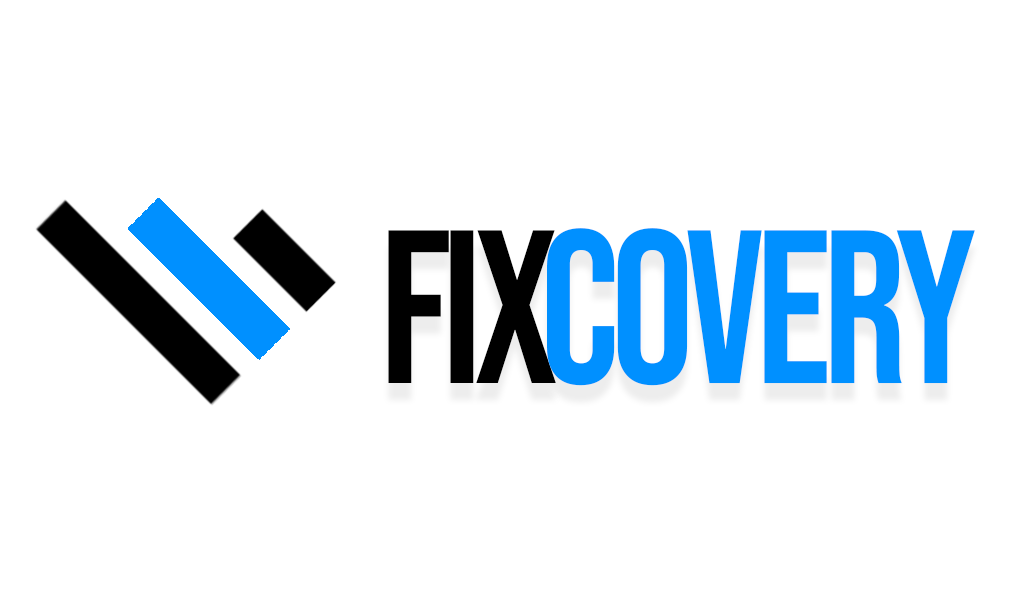
<style>
.page{position:relative;width:1034px;height:600px;background:#ffffff}
.page>*{position:absolute;margin:0}
.t1{font:218px "BebasNeue-Regular";letter-spacing:-0.04em;color:#000000;scale:0.95 1}
.t2{font:218px "BebasNeue-Regular";letter-spacing:-0.04em;color:#0090ff;scale:0.95 1}
</style>
<div class="page">
<p class="t1" style="left:388px;top:230px;width:168px;height:153px">FIX</p>
<p class="t2" style="left:547px;top:228px;width:428px;height:158px">covery</p>
</div>
